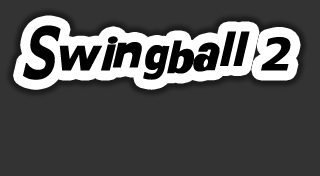
<style>
.page{position:relative;width:320px;height:176px;background:#333333}
.page>*{position:absolute;margin:0}
.t1{font:45px "KittyKatt";color:#000000}
</style>
<div class="page">
<p class="t1" style="left:23px;top:25px;width:268px;height:55px">Swingball 2</p>
</div>
